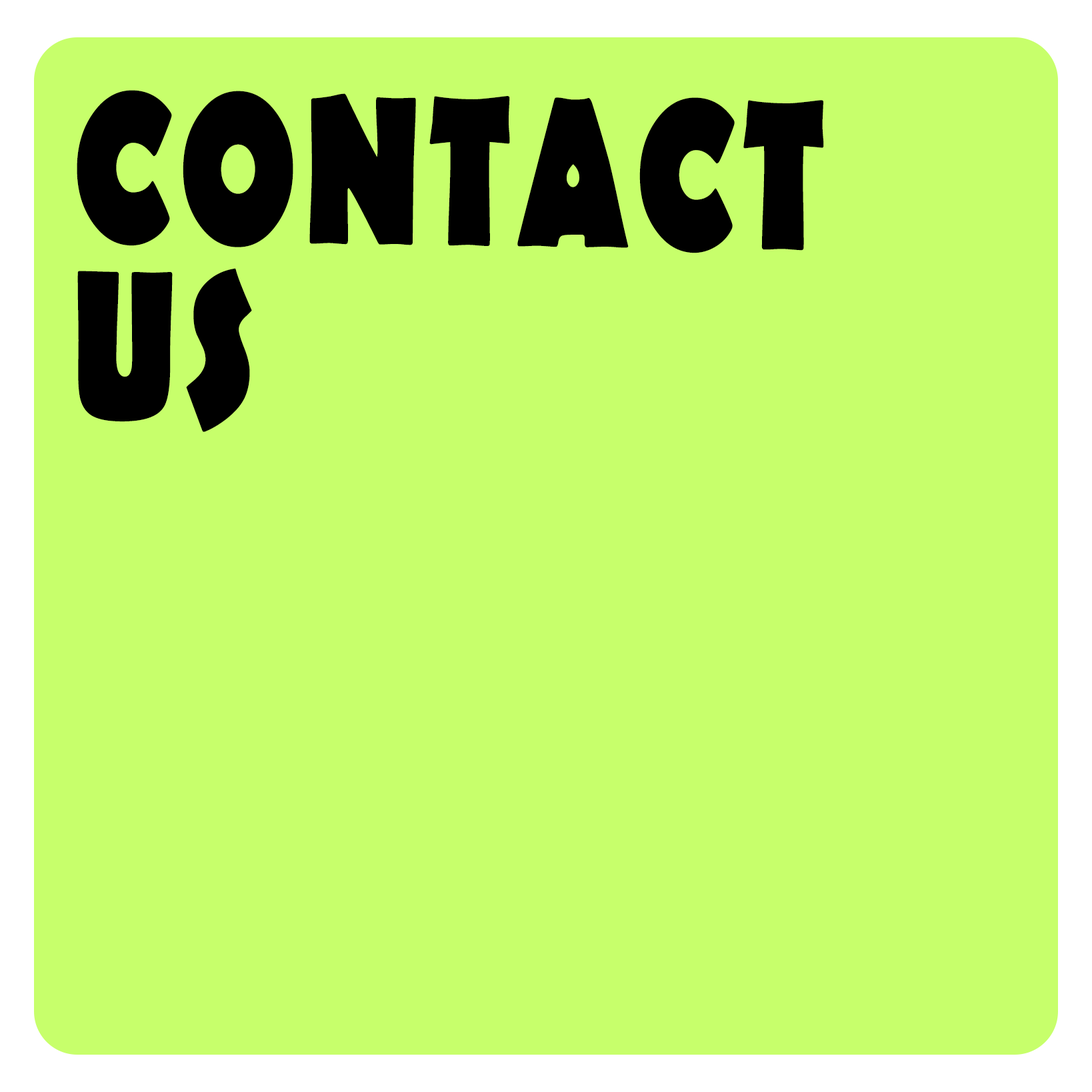
<style>
.page{position:relative;width:1092px;height:1092px;background:#c7ff6b}
.page>*{position:absolute;margin:0}
.t1{font:214.5px "BerlinSansFB-Bold";letter-spacing:0.05em;color:#000000;scale:0.71 1}
</style>
<div class="page">
<p class="t1" style="left:77px;top:90px;width:747px;height:342px;rotate:1deg">CONTACT   US</p>
</div>
